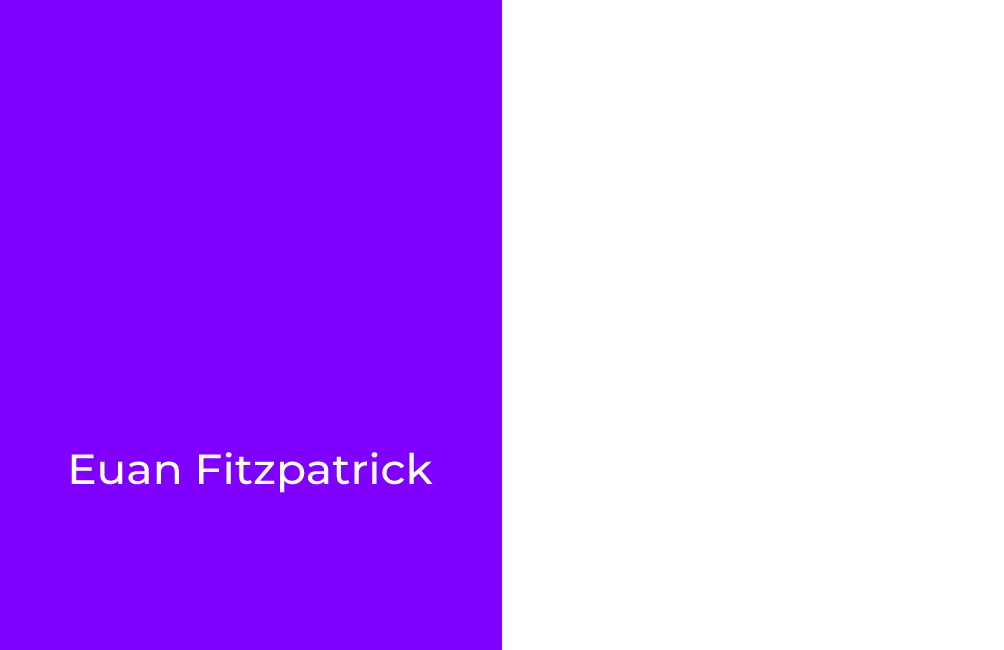
<style>
.page{position:relative;width:1004px;height:650px;background:#ffffff}
.page>*{position:absolute;margin:0}
.t1{font:42px "Montserrat-Medium";color:#ffffff;font-weight:bold;scale:1.05 1}
</style>
<div class="page">
<p class="t1" style="left:71px;top:452px;width:362px;height:41px">Euan Fitzpatrick</p>
</div>
